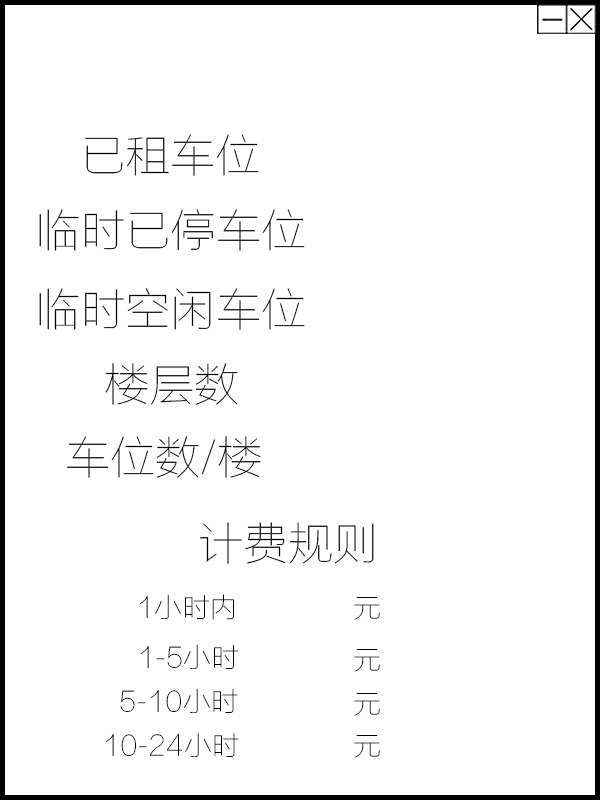
<style>
.page{position:relative;width:600px;height:800px;background:#ffffff}
.page>*{position:absolute;margin:0}
.t1{font:45.1px "FZLTCXHJW--GB1-0";color:#000000}
.t2{font:27.8px "FZLTCXHJW--GB1-0";color:#000000}
</style>
<div class="page">
<p class="t1" style="left:85px;top:134px;width:174px;height:42px">已租车位</p>
<p class="t1" style="left:39px;top:209px;width:266px;height:42px">临时已停车位</p>
<p class="t1" style="left:39px;top:288px;width:266px;height:42px">临时空闲车位</p>
<p class="t1" style="left:105px;top:363px;width:133px;height:42px">楼层数</p>
<p class="t1" style="left:67px;top:436px;width:194px;height:42px">车位数/楼</p>
<p class="t1" style="left:200px;top:522px;width:174px;height:42px">计费规则</p>
<p class="t2" style="left:139px;top:594px;width:95px;height:26px">1小时内</p>
<p class="t2" style="left:354px;top:597px;width:26px;height:23px">元</p>
<p class="t2" style="left:140px;top:644px;width:98px;height:25px">1-5小时</p>
<p class="t2" style="left:354px;top:649px;width:26px;height:23px">元</p>
<p class="t2" style="left:120px;top:688px;width:118px;height:25px">5-10小时</p>
<p class="t2" style="left:354px;top:693px;width:26px;height:23px">元</p>
<p class="t2" style="left:105px;top:732px;width:134px;height:25px">10-24小时</p>
<p class="t2" style="left:354px;top:735px;width:26px;height:23px">元</p>
</div>
